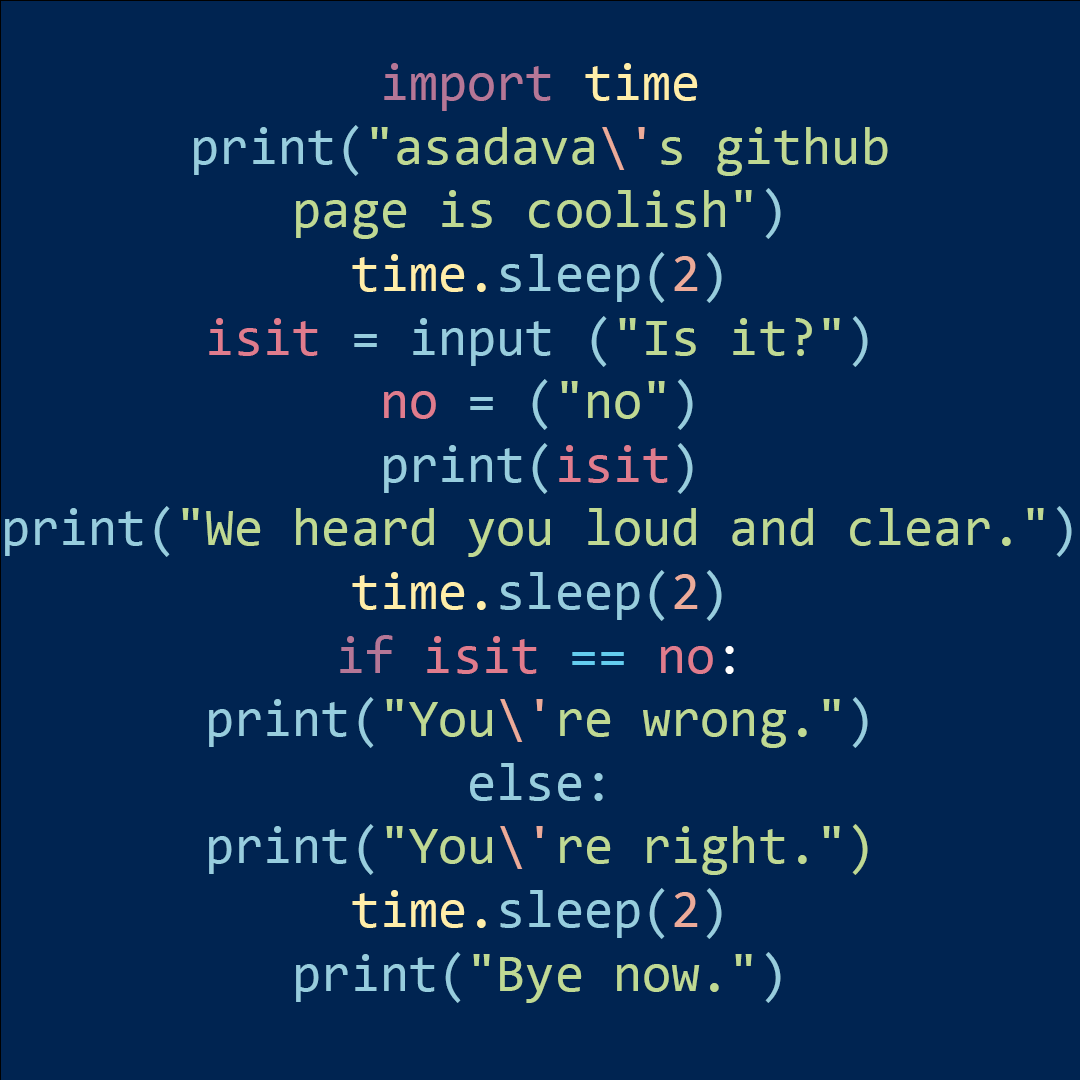
<style>
.page{position:relative;width:1080px;height:1080px;background:#002451}
.page>*{position:absolute;margin:0}
.t1{font:53px "Consolas";color:#bfd993}
.t2{font:53px "Consolas";color:#97cdde}
.t3{font:53px "Consolas";color:#b57797}
.t4{font:53px "Consolas";color:#ffeea9}
.t5{font:53px "Consolas";color:#ecab99}
.t6{font:53px "Consolas";color:#e07c8d}
.t7{font:53px "Consolas";color:#64cdef}
.t8{font:53px "Consolas";color:#ffffff}
</style>
<div class="page">
<p class="t1" style="left:5px;top:63px;width:1067px;height:940px;text-align:center"><span class="t2"><br></span><span class="t3">import </span><span class="t4">time<br></span><span class="t2">print(</span>"asadava<span class="t5">\'</span>s github page is coolish"<span class="t2">)<br></span><span class="t4">time.</span><span class="t2">sleep(</span><span class="t5">2</span><span class="t2">)<br></span><span class="t6">isit</span><span class="t2"> = input (</span>"Is it?"<span class="t2">)<br></span><span class="t6">no</span><span class="t2"> = (</span>"no"<span class="t2">)<br>print(</span><span class="t6">isit</span><span class="t2">)<br>print(</span>"We heard you loud and clear."<span class="t2">)<br></span><span class="t4">time.</span><span class="t2">sleep(</span><span class="t5">2</span><span class="t2">)<br></span><span class="t3">if </span><span class="t6">isit </span><span class="t7">==</span><span class="t6"> no</span><span class="t8">:<br></span><span class="t2">print(</span>"You<span class="t5">\'</span>re wrong."<span class="t2">)<br>else:<br>print(</span>"You<span class="t5">\'</span>re right.")<br><span class="t4">time.</span><span class="t2">sleep(</span><span class="t5">2</span><span class="t2">)<br>print(</span>"Bye now."<span class="t2">)</span></p>
</div>
